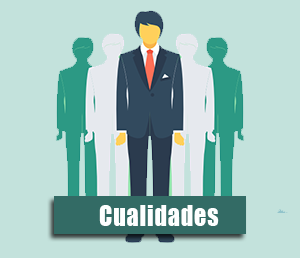
<style>
.page{position:relative;width:300px;height:258px;background:#c3e2dc}
.page>*{position:absolute;margin:0}
.t1{font:26.6px "Impact";letter-spacing:0.036em;color:#fdffff;scale:0.9 1}
</style>
<div class="page">
<p class="t1" style="left:99px;top:205px;width:120px;height:21px">Cualidades</p>
</div>
